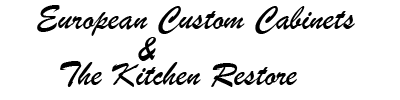
<style>
.page{position:relative;width:400px;height:100px;background:#ffffff}
.page>*{position:absolute;margin:0}
.t1{font:36px "BrushScriptMT";color:#000000}
</style>
<div class="page">
<p class="t1" style="left:37px;top:5px;width:318px;height:31px">European Custom Cabinets</p>
<p class="t1" style="left:138px;top:37px;width:18px;height:24px">&amp;</p>
<p class="t1" style="left:60px;top:61px;width:237px;height:26px">The Kitchen Restore</p>
</div>
